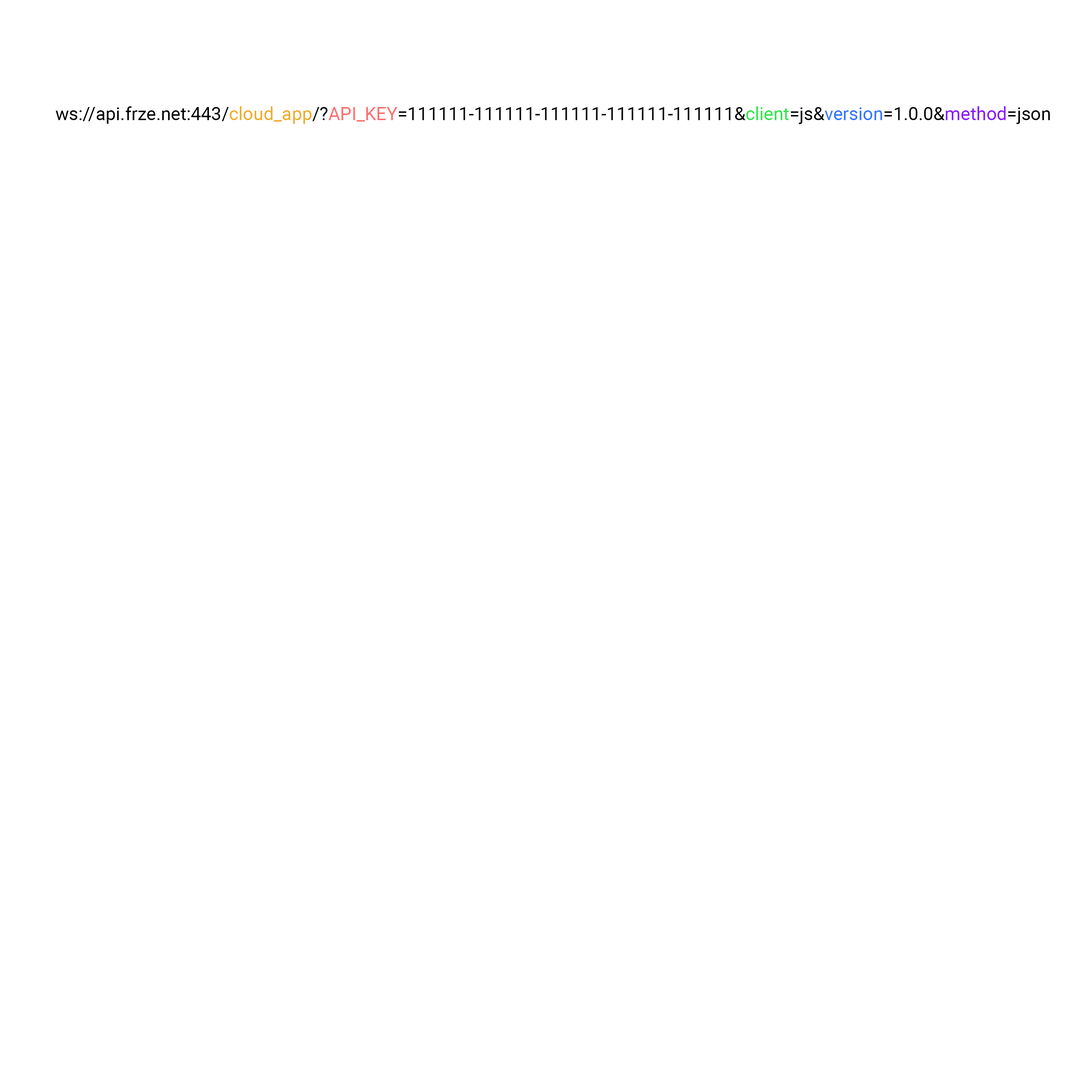
<style>
.page{position:relative;width:1092px;height:1092px;background:#ffffff}
.page>*{position:absolute;margin:0}
.t1{font:18.2px "Roboto-Regular";color:#000000}
.t2{font:18.2px "Roboto-Regular";color:#efac2a}
.t3{font:18.2px "Roboto-Regular";color:#ff6e6e}
.t4{font:18.2px "Roboto-Regular";color:#30e44a}
.t5{font:18.2px "Roboto-Regular";color:#3376ff}
.t6{font:18.2px "Roboto-Regular";color:#8915ff}
</style>
<div class="page">
<p class="t1" style="left:56px;top:106px;width:994px;height:18px">ws://api.frze.net:443/<span class="t2">cloud_app</span>/?<span class="t3">API_KEY</span>=111111-111111-111111-111111-111111&amp;<span class="t4">client</span>=js&amp;<span class="t5">version</span>=1.0.0&amp;<span class="t6">method</span>=json</p>
</div>
